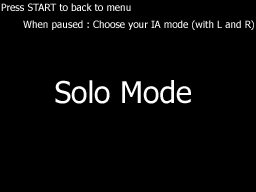
<style>
.page{position:relative;width:256px;height:192px;background:#000000}
.page>*{position:absolute;margin:0}
.t1{font:10px "Tahoma";color:#ffffff}
.t2{font:30px "Tahoma";color:#ffffff}
</style>
<div class="page">
<p class="t1" style="left:1px;top:3px;width:130px;height:8px">Press START to back to menu</p>
<p class="t1" style="left:23px;top:20px;width:231px;height:10px">When paused : Choose your IA mode (with L and R)</p>
<p class="t2" style="left:55px;top:80px;width:136px;height:24px">Solo Mode</p>
</div>
